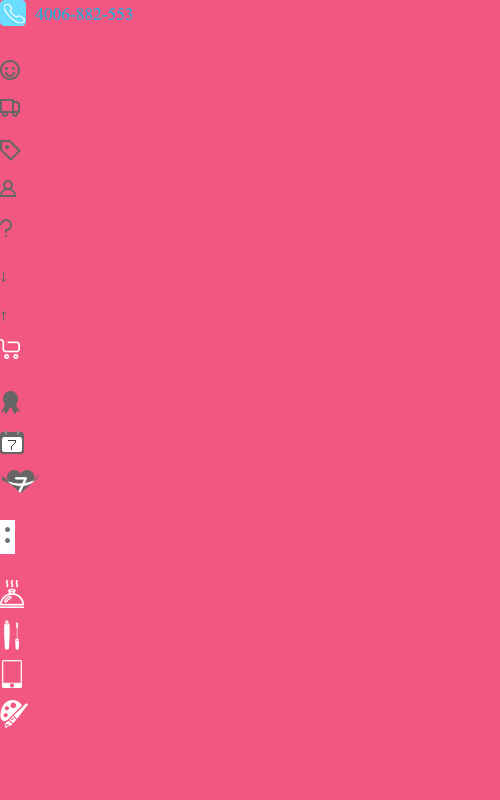
<style>
.page{position:relative;width:500px;height:800px;background:#f25781}
.page>*{position:absolute;margin:0}
.t1{font:17.4px "TimesNewRomanPSMT";color:#2aa5d2}
</style>
<div class="page">
<p class="t1" style="left:35px;top:8px;width:98px;height:12px">4006-882-553</p>
</div>
